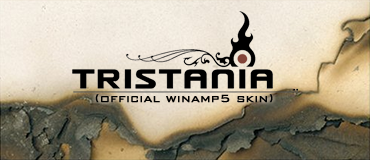
<style>
.page{position:relative;width:370px;height:160px}
.page>*{position:absolute;margin:0}
.t1{font:14px "BankGothicBT-Light";color:#000000;font-weight:bold}
</style>
<div class="page">
<p class="t1" style="left:95px;top:94px;width:178px;height:9px">(official winamp5 skin)</p>
</div>
